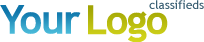
<style>
.page{position:relative;width:204px;height:42px;background:#ffffff}
.page>*{position:absolute;margin:0}
.t1{font:40px "TrebuchetMS-Bold";letter-spacing:-0.06em;font-weight:bold}
.t2{font:40px "TrebuchetMS-Bold";letter-spacing:-0.06em;color:#bbbe10;font-weight:bold}
.t3{font:12px "TrebuchetMS";color:#3b6074}
</style>
<div class="page">
<p class="t1" style="left:0px;top:5px;width:81px;height:29px">Your</p>
<p class="t2" style="left:88px;top:5px;width:80px;height:37px">Logo</p>
<p class="t3" style="left:149px;top:0px;width:55px;height:9px">classifieds</p>
</div>
